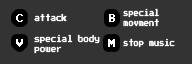
<style>
.page{position:relative;width:192px;height:64px;background:#333333}
.page>*{position:absolute;margin:0}
.t1{font:9px "PressStart2P";color:#ffffff;scale:0.86 1}
.t2{font:8px "PressStart2P";color:#ffffff;scale:0.68 1}
.t3{font:8.6px "PressStart2P";color:#ffffff;scale:0.86 1}
.t4{font:8px/10px "PressStart2P";color:#ffffff;scale:0.64 1}
.t5{font:9.2px "PressStart2P";color:#ffffff;scale:0.82 1}
.t6{font:8px/10px "PressStart2P";color:#ffffff;scale:0.68 1}
.t7{font:8.6px "PressStart2P";color:#ffffff;scale:0.93 1}
.t8{font:8px "PressStart2P";color:#ffffff;scale:0.64 1}
</style>
<div class="page">
<p class="t1" style="left:16px;top:14px;width:7px;height:8px">C</p>
<p class="t2" style="left:34px;top:13px;width:33px;height:9px">attack</p>
<p class="t3" style="left:109px;top:14px;width:6px;height:8px">B</p>
<p class="t4" style="left:123px;top:8px;width:36px;height:19px">special movment</p>
<p class="t5" style="left:16px;top:39px;width:7px;height:8px">V</p>
<p class="t6" style="left:34px;top:34px;width:66px;height:20px">special body power</p>
<p class="t7" style="left:108px;top:39px;width:7px;height:8px">M</p>
<p class="t8" style="left:123px;top:38px;width:52px;height:10px">stop music</p>
</div>
